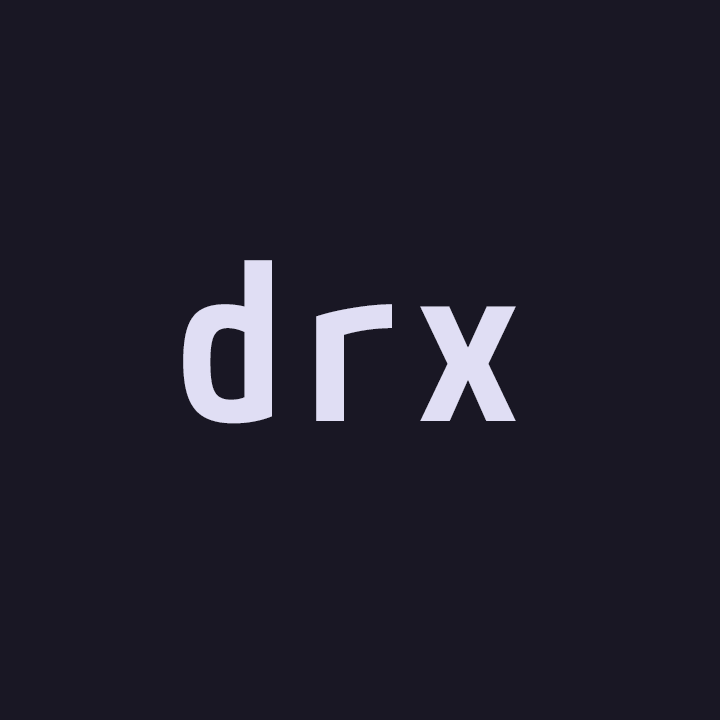
<style>
.page{position:relative;width:720px;height:720px;background:#191724}
.page>*{position:absolute;margin:0}
.t1{font:220px "MPLUSCodeLatin-SemiBold";letter-spacing:0.04em;color:#e0def4}
</style>
<div class="page">
<p class="t1" style="left:183px;top:260px;width:333px;height:164px">drx</p>
</div>
